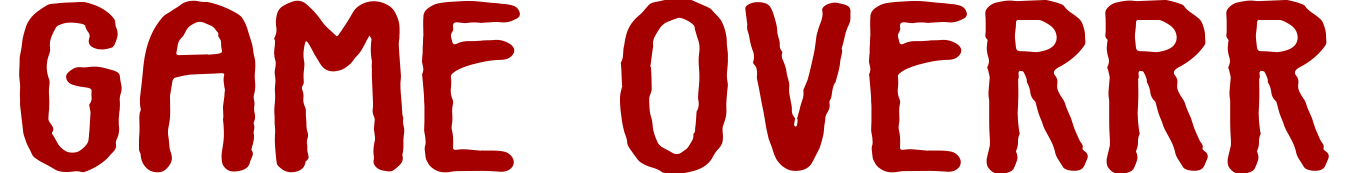
<style>
.page{position:relative;width:1347px;height:173px;background:#ffffff}
.page>*{position:absolute;margin:0}
.t1{font:244px "Vintages";color:#a40000;scale:1.46 1}
</style>
<div class="page">
<p class="t1" style="left:19px;top:0px;width:1310px;height:174px">GAME OVERRR</p>
</div>
